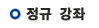
<style>
.page{position:relative;width:99px;height:28px;background:#ffffff}
.page>*{position:absolute;margin:0}
.t1{font:14.3px "YDIYGO150-KSCPC-EUC-H";letter-spacing:-0.01em;color:#2a2b29;font-weight:bold;scale:0.91 1}
</style>
<div class="page">
<p class="t1" style="left:26px;top:7px;width:59px;height:14px">정규 강좌</p>
</div>
